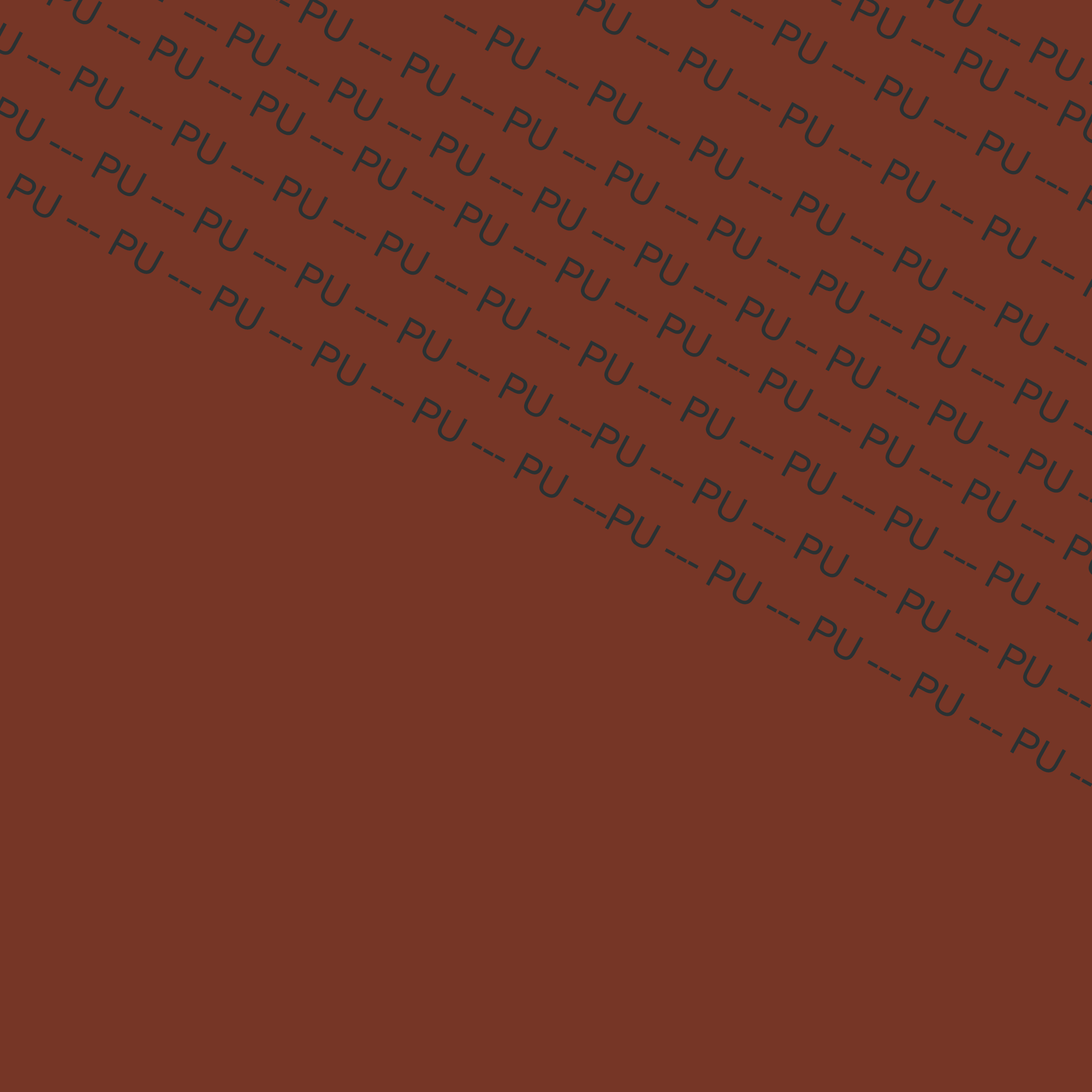
<style>
.page{position:relative;width:1092px;height:1092px;background:#763626}
.page>*{position:absolute;margin:0}
.t1{font:39.3px "ArialMT";color:#2a3132}
</style>
<div class="page">
<p class="t1" style="left:443px;top:14px;width:645px;height:352px;rotate:29deg">--- PU --- PU --- PU --- PU --- PU --- PU ---</p>
</div>
